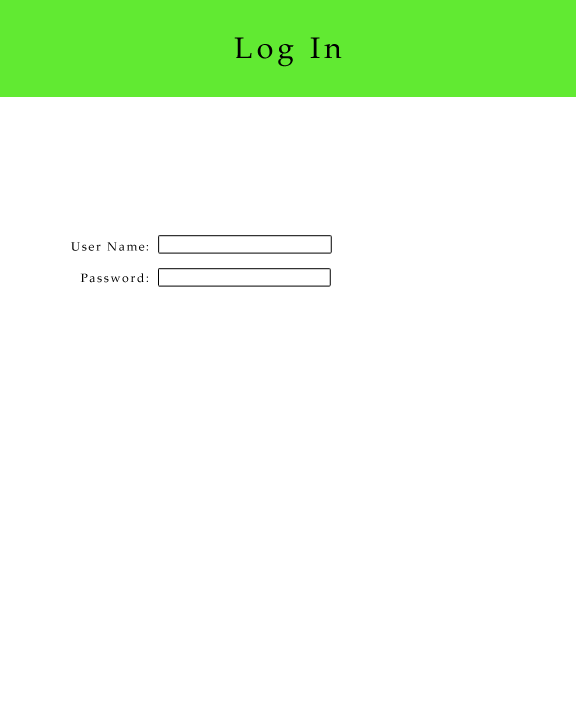
<style>
.page{position:relative;width:576px;height:720px;background:#ffffff}
.page>*{position:absolute;margin:0}
.t1{font:30px "PalatinoLinotype-Roman";letter-spacing:0.14em;color:#000000}
.t2{font:12px "PalatinoLinotype-Roman";letter-spacing:0.14em;color:#000000}
</style>
<div class="page">
<p class="t1" style="left:234px;top:37px;width:108px;height:30px">Log In</p>
<p class="t2" style="left:71px;top:242px;width:77px;height:9px">User Name:</p>
<p class="t2" style="left:80px;top:273px;width:68px;height:10px">Password:</p>
</div>
